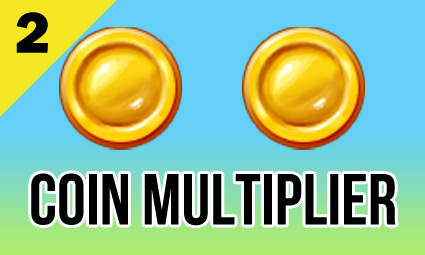
<style>
.page{position:relative;width:425px;height:255px;background:#64cff7}
.page>*{position:absolute;margin:0}
.t1{font:60px "FranklinGothic-Heavy";color:#000000}
.t2{font:72px "BebasNeueBold";color:#000000}
</style>
<div class="page">
<p class="t1" style="left:16px;top:12px;width:32px;height:41px">2</p>
<p class="t2" style="left:31px;top:173px;width:365px;height:53px">COIN MULTIPLIER</p>
</div>
